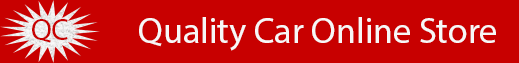
<style>
.page{position:relative;width:519px;height:63px;background:#c80000}
.page>*{position:absolute;margin:0}
.t1{font:36px "MyriadPro-Regular";color:#f7f7f7}
.t2{font:30px "MyriadPro-Regular";color:#c80000}
</style>
<div class="page">
<p class="t1" style="left:139px;top:17px;width:357px;height:34px">Quality Car Online Store</p>
<p class="t2" style="left:32px;top:19px;width:36px;height:24px">QC</p>
</div>
